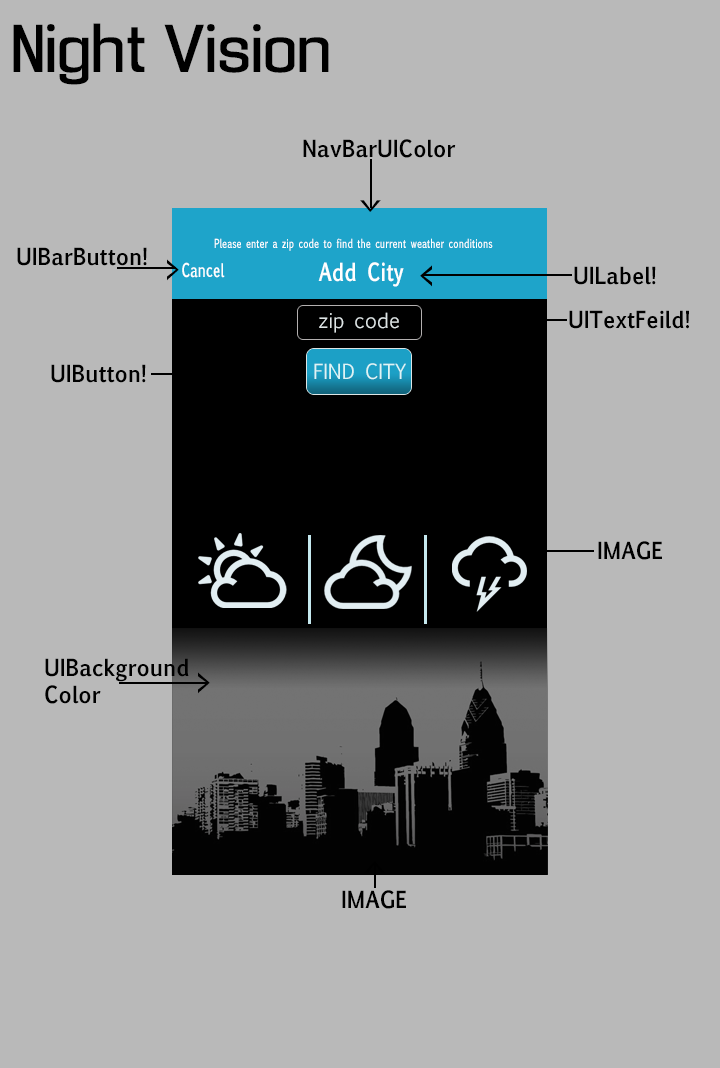
<style>
.page{position:relative;width:720px;height:1068px;background:#b9b9b9}
.page>*{position:absolute;margin:0}
.t1{font:63px "EnigmaticUnicode";color:#000000}
.t2{font:22.6px "EuphemiaUCAS-Bold";color:#000000;scale:0.92 1}
.t3{font:29.9px "EuphemiaUCAS-Bold";color:#000000;scale:0.71 1}
.t4{font:12px "EuphemiaUCAS-Bold";color:#ffffff;scale:0.7 1}
.t5{font:30px "EuphemiaUCAS-Bold";color:#000000;scale:0.7 1}
.t6{font:18px "EuphemiaUCAS-Bold";color:#ffffff;scale:0.7 1}
.t7{font:24px "EuphemiaUCAS-Bold";color:#ffffff;scale:0.8 1}
.t8{font:20px "EuphemiaUCAS";color:#dde3e4}
.t9{font:20px "EuphemiaUCAS";color:#def4f5}
</style>
<div class="page">
<p class="t1" style="left:13px;top:23px;width:316px;height:62px">Night Vision</p>
<p class="t2" style="left:303px;top:139px;width:153px;height:19px">NavBarUIColor</p>
<p class="t3" style="left:360px;top:200px;width:21px;height:12px;rotate:90deg">&gt;</p>
<p class="t4" style="left:214px;top:238px;width:279px;height:13px">Please enter a zip code to find the current weather conditions</p>
<p class="t2" style="left:17px;top:247px;width:130px;height:19px">UIBarButton!</p>
<p class="t5" style="left:167px;top:259px;width:12px;height:22px">&gt;</p>
<p class="t6" style="left:182px;top:262px;width:43px;height:16px">Cancel</p>
<p class="t7" style="left:318px;top:262px;width:86px;height:25px">Add City</p>
<p class="t2" style="left:574px;top:266px;width:82px;height:19px">UILabel!</p>
<p class="t8" style="left:319px;top:312px;width:80px;height:21px">zip code</p>
<p class="t2" style="left:569px;top:310px;width:120px;height:19px">UITextFeild!</p>
<p class="t2" style="left:51px;top:364px;width:95px;height:19px">UIButton!</p>
<p class="t9" style="left:314px;top:363px;width:92px;height:17px">FIND CITY</p>
<p class="t2" style="left:598px;top:541px;width:64px;height:19px">IMAGE</p>
<p class="t2" style="left:45px;top:658px;width:144px;height:46px">UIBackground<br>Color</p>
<p class="t5" style="left:198px;top:672px;width:12px;height:22px">&gt;</p>
<p class="t2" style="left:342px;top:890px;width:64px;height:19px">IMAGE</p>
</div>
